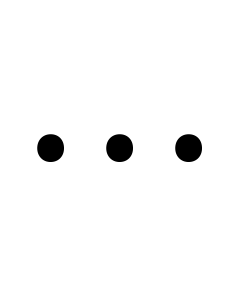
<style>
.page{position:relative;width:250px;height:300px;background:#ffffff}
.page>*{position:absolute;margin:0}
.t1{font:150px "MyriadPro-Bold";letter-spacing:0.2em;color:#000000}
</style>
<div class="page">
<p class="t1" style="left:37px;top:134px;width:165px;height:28px">...</p>
</div>
